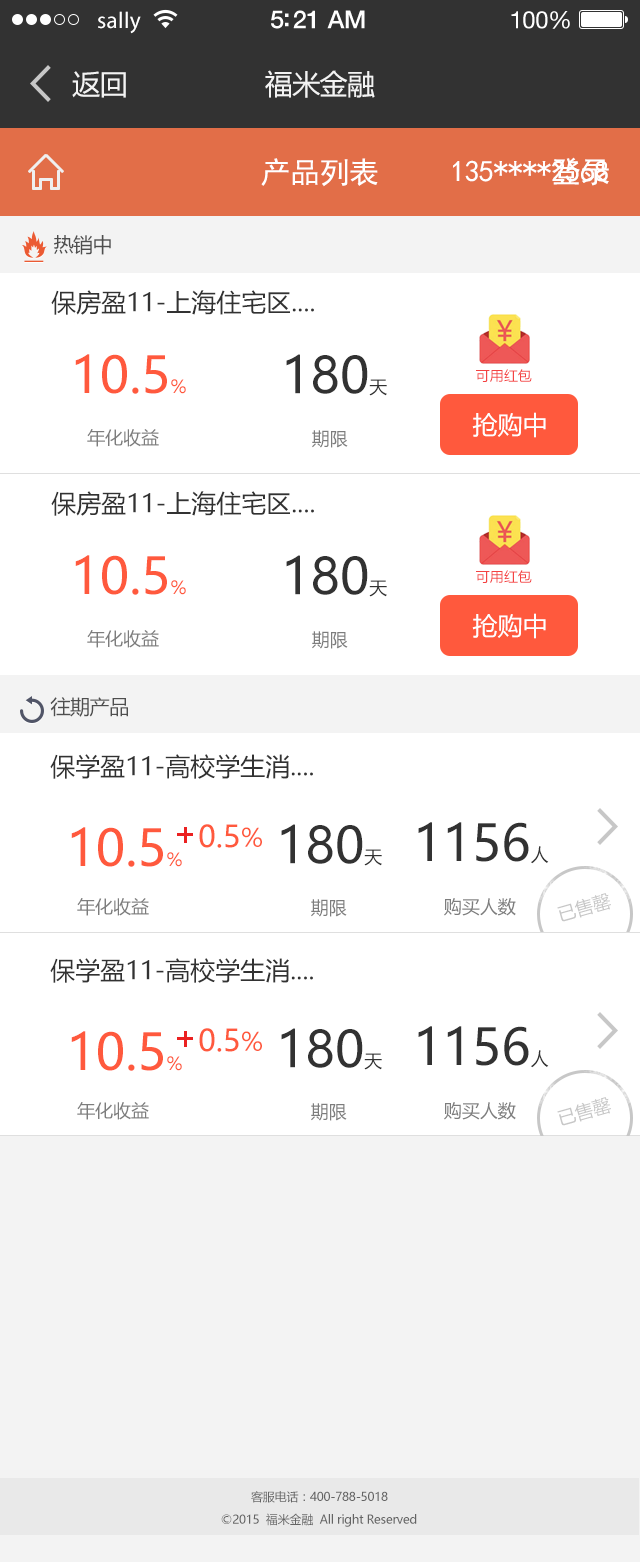
<style>
.page{position:relative;width:640px;height:1562px;background:#ffffff}
.page>*{position:absolute;margin:0}
.t1{font:23px "MyriadPro-Regular";letter-spacing:0.02em;color:#ffffff}
.t2{font:25px "HelveticaNeue-Medium";letter-spacing:-0.02em;color:#ffffff}
.t3{font:24px "HelveticaNeue";letter-spacing:-0.02em;color:#ffffff}
.t4{font:28px "MicrosoftYaHei";letter-spacing:-0.02em;color:#f3f3f3}
.t5{font:30px "SimHei";letter-spacing:-0.02em;color:#ffffff}
.t6{font:20px "MicrosoftYaHei";letter-spacing:-0.02em;color:#4e4e4e}
.t7{font:25px "MicrosoftYaHei";color:#323232}
.t8{font:50px "MicrosoftYaHei";color:#ff593d}
.t9{font:18px "MicrosoftYaHei";color:#ff593d}
.t10{font:50px "MicrosoftYaHei";color:#323232}
.t11{font:18px "MicrosoftYaHei";color:#323232}
.t12{font:14px "MicrosoftYaHei";color:#f44242}
.t13{font:25px "MicrosoftYaHei";color:#ffffff}
.t14{font:18px "MicrosoftYaHei";color:#7d7d7d}
.t15{font:30px "MicrosoftYaHei";color:#ff593d}
.t16{font:25px "MicrosoftYaHei";color:#ff593d}
.t17{font:18px "MicrosoftYaHei";color:#c7c7c7}
.t18{font:12px "MicrosoftYaHei";letter-spacing:-0.02em;color:#646464}
</style>
<div class="page">
<p class="t1" style="left:98px;top:11px;width:43px;height:23px">sally</p>
<p class="t2" style="left:271px;top:10px;width:94px;height:19px">5:21 AM</p>
<p class="t3" style="left:511px;top:11px;width:59px;height:18px">100%</p>
<p class="t4" style="left:72px;top:71px;width:54px;height:27px">返回</p>
<p class="t4" style="left:265px;top:70px;width:110px;height:28px">福米金融</p>
<p class="t5" style="left:261px;top:158px;width:117px;height:29px">产品列表</p>
<p class="t5" style="left:453px;top:160px;width:155px;height:22px">135****2568</p>
<p class="t5" style="left:552px;top:157px;width:57px;height:29px">登录</p>
<p class="t6" style="left:54px;top:235px;width:57px;height:20px">热销中</p>
<p class="t7" style="left:51px;top:290px;width:263px;height:25px">保房盈11-上海住宅区....</p>
<p class="t8" style="left:75px;top:354px;width:111px;height:40px">10.5<span class="t9">%</span></p>
<p class="t10" style="left:286px;top:354px;width:101px;height:42px">180<span class="t11">天</span></p>
<p class="t12" style="left:476px;top:369px;width:56px;height:13px">可用红包</p>
<p class="t13" style="left:472px;top:412px;width:74px;height:26px">抢购中</p>
<p class="t14" style="left:87px;top:429px;width:72px;height:18px">年化收益</p>
<p class="t14" style="left:312px;top:430px;width:36px;height:18px">期限</p>
<p class="t7" style="left:51px;top:491px;width:263px;height:25px">保房盈11-上海住宅区....</p>
<p class="t8" style="left:75px;top:555px;width:111px;height:40px">10.5<span class="t9">%</span></p>
<p class="t10" style="left:286px;top:555px;width:101px;height:42px">180<span class="t11">天</span></p>
<p class="t12" style="left:476px;top:570px;width:56px;height:13px">可用红包</p>
<p class="t13" style="left:472px;top:613px;width:74px;height:26px">抢购中</p>
<p class="t14" style="left:87px;top:630px;width:72px;height:18px">年化收益</p>
<p class="t14" style="left:312px;top:631px;width:36px;height:18px">期限</p>
<p class="t6" style="left:50px;top:697px;width:78px;height:20px">往期产品</p>
<p class="t7" style="left:50px;top:754px;width:263px;height:25px">保学盈11-高校学生消....</p>
<p class="t10" style="left:418px;top:822px;width:131px;height:42px">1156<span class="t11">人</span></p>
<p class="t8" style="left:71px;top:827px;width:111px;height:40px">10.5<span class="t9">%</span></p>
<p class="t15" style="left:199px;top:824px;width:40px;height:24px">0.5</p>
<p class="t16" style="left:242px;top:827px;width:20px;height:20px">%</p>
<p class="t10" style="left:281px;top:824px;width:101px;height:42px">180<span class="t11">天</span></p>
<p class="t17" style="left:557px;top:893px;width:54px;height:29px;rotate:-16deg">已售罄</p>
<p class="t14" style="left:77px;top:898px;width:72px;height:18px">年化收益</p>
<p class="t14" style="left:311px;top:899px;width:36px;height:18px">期限</p>
<p class="t14" style="left:444px;top:898px;width:72px;height:18px">购买人数</p>
<p class="t7" style="left:50px;top:958px;width:263px;height:25px">保学盈11-高校学生消....</p>
<p class="t8" style="left:71px;top:1031px;width:111px;height:40px">10.5<span class="t9">%</span></p>
<p class="t15" style="left:199px;top:1028px;width:40px;height:24px">0.5</p>
<p class="t16" style="left:242px;top:1031px;width:20px;height:20px">%</p>
<p class="t10" style="left:281px;top:1028px;width:101px;height:42px">180<span class="t11">天</span></p>
<p class="t10" style="left:418px;top:1026px;width:131px;height:42px">1156<span class="t11">人</span></p>
<p class="t17" style="left:557px;top:1097px;width:54px;height:29px;rotate:-16deg">已售罄</p>
<p class="t14" style="left:77px;top:1102px;width:72px;height:18px">年化收益</p>
<p class="t14" style="left:311px;top:1103px;width:36px;height:18px">期限</p>
<p class="t14" style="left:444px;top:1102px;width:72px;height:18px">购买人数</p>
<p class="t18" style="left:251px;top:1491px;width:137px;height:12px">客服电话：400-788-5018</p>
<p class="t18" style="left:221px;top:1513px;width:196px;height:14px">©2015  福米金融  All right Reserved</p>
</div>
